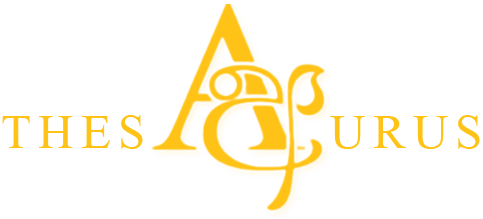
<style>
.page{position:relative;width:483px;height:219px;background:#ffffff}
.page>*{position:absolute;margin:0}
.t1{font:49.1px "TimesNewRomanPSMT";letter-spacing:0.15em;color:#ffc417;text-transform:uppercase}
</style>
<div class="page">
<p class="t1" style="left:2px;top:115px;width:478px;height:34px">THes         urus</p>
</div>
